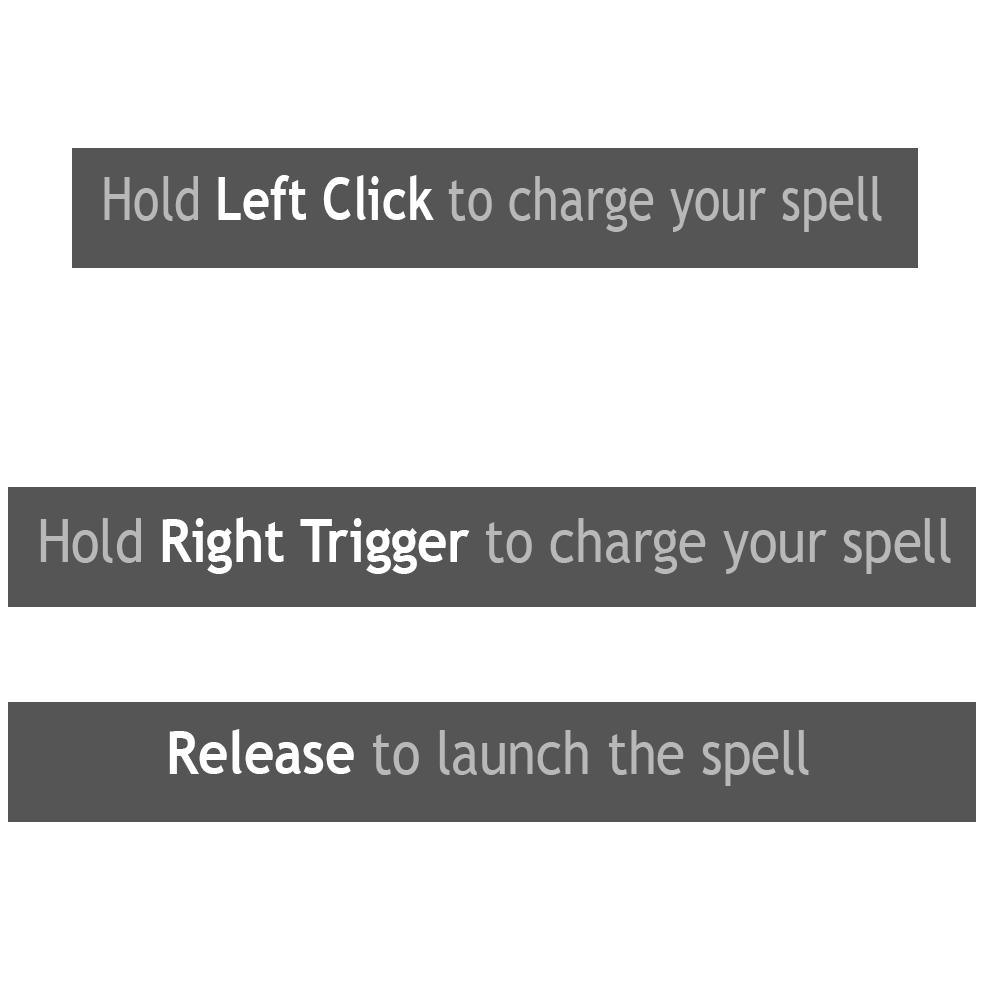
<style>
.page{position:relative;width:1000px;height:1000px;background:#ffffff}
.page>*{position:absolute;margin:0}
.t1{font:60px "TrebuchetMS";color:#b8b8b8;scale:0.82 1}
.t2{font:60px "TrebuchetMS-Bold";color:#ffffff;scale:0.82 1}
.t3{font:60px "TrebuchetMS";color:#b8b8b8;scale:0.88 1}
.t4{font:60px "TrebuchetMS-Bold";color:#ffffff;scale:0.88 1}
</style>
<div class="page">
<p class="t1" style="left:104px;top:175px;width:778px;height:57px">Hold <span class="t2">Left Click </span>to charge your spell</p>
<p class="t3" style="left:40px;top:517px;width:911px;height:57px">Hold <span class="t4">Right Trigger </span>to charge your spell</p>
<p class="t3" style="left:169px;top:729px;width:640px;height:57px"><span class="t4">Release</span> to launch the spell</p>
</div>
